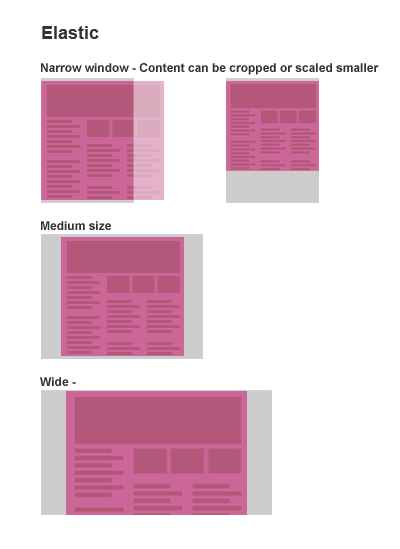
<style>
.page{position:relative;width:400px;height:549px;background:#ffffff}
.page>*{position:absolute;margin:0}
.t1{font:18px "Arial-BoldMT";color:#333333}
.t2{font:12px "Arial-BoldMT";color:#333333}
</style>
<div class="page">
<p class="t1" style="left:42px;top:26px;width:57px;height:13px">Elastic</p>
<p class="t2" style="left:41px;top:63px;width:338px;height:12px">Narrow window - Content can be cropped or scaled smaller</p>
<p class="t2" style="left:41px;top:221px;width:70px;height:9px">Medium size</p>
<p class="t2" style="left:40px;top:377px;width:36px;height:9px">Wide -</p>
</div>
